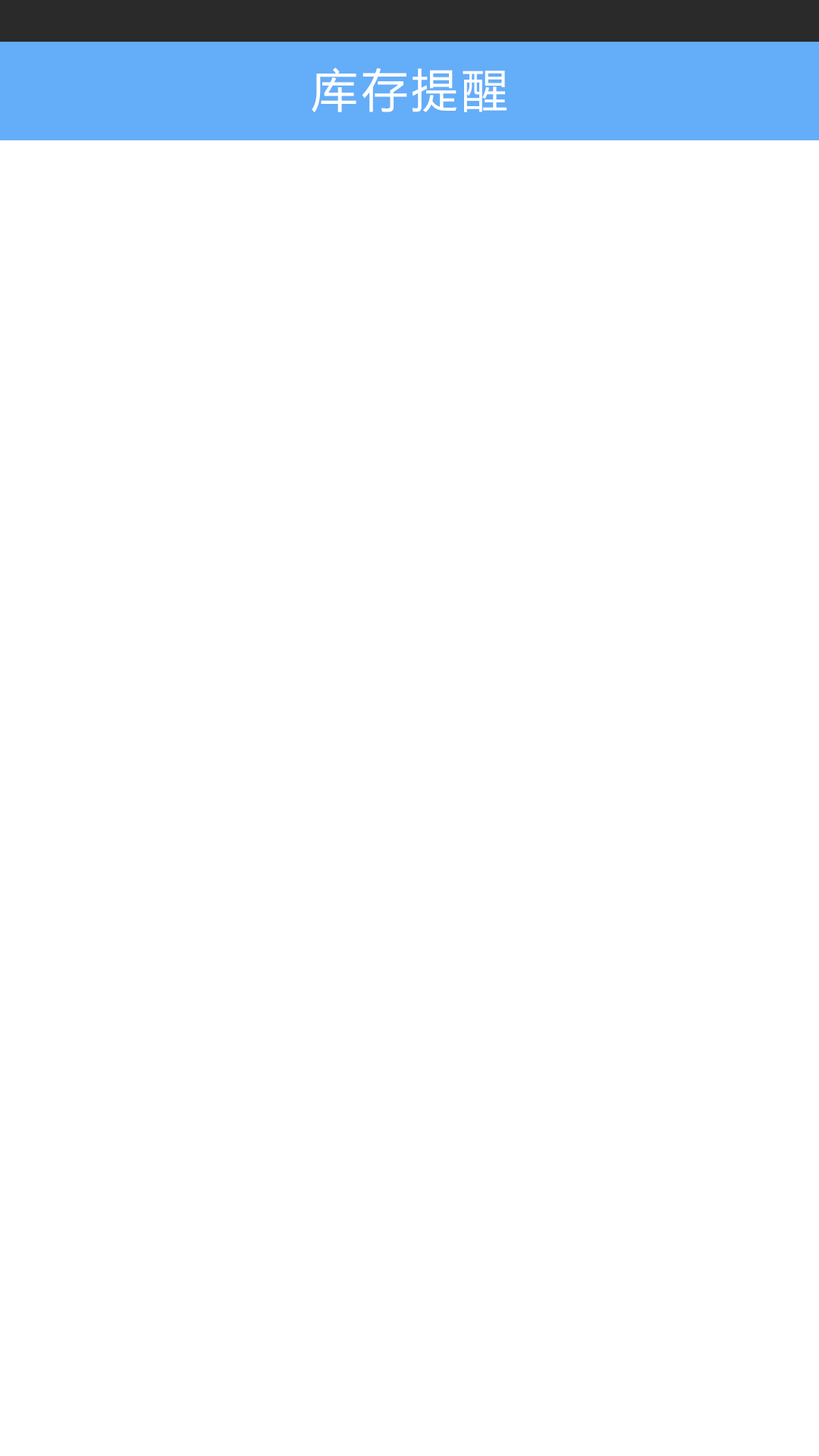
<style>
.page{position:relative;width:819px;height:1456px;background:#ffffff}
.page>*{position:absolute;margin:0}
.t1{font:45.5px "MicrosoftYaHei";letter-spacing:0.1em;color:#fefefe}
</style>
<div class="page">
<p class="t1" style="left:312px;top:67px;width:195px;height:46px">库存提醒</p>
</div>
